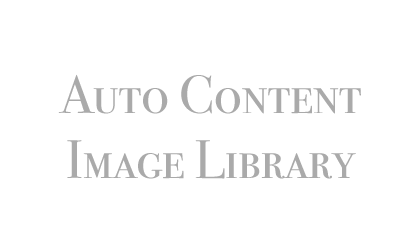
<style>
.page{position:relative;width:420px;height:252px;background:#ffffff}
.page>*{position:absolute;margin:0}
.t1{font:54.2px "BodoniSvtyTwoSCITCTT-Book";color:#aaaaaa}
</style>
<div class="page">
<p class="t1" style="left:58px;top:74px;width:303px;height:105px;text-align:center">Auto Content<br>Image Library</p>
</div>
